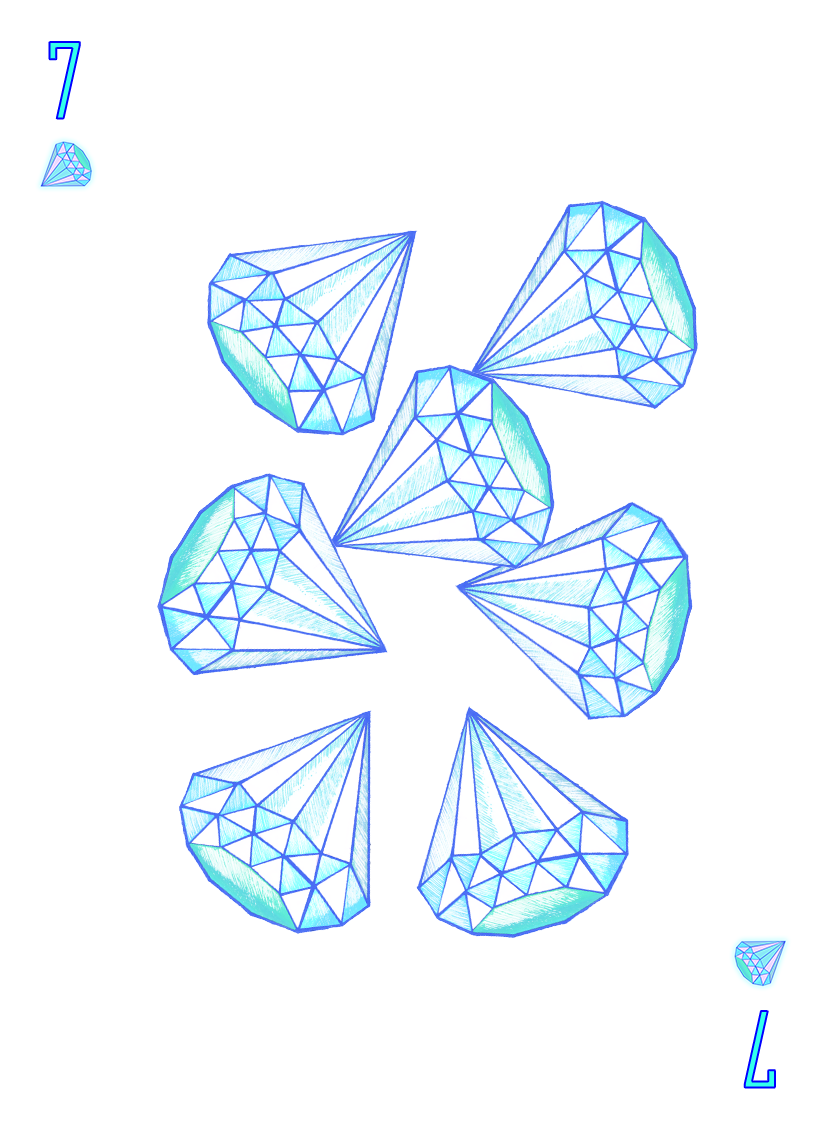
<style>
.page{position:relative;width:825px;height:1125px;background:#ffffff}
.page>*{position:absolute;margin:0}
.t1{font:100px "AgencyFB-Reg";color:#32ffeb}
</style>
<div class="page">
<p class="t1" style="left:49px;top:42px;width:31px;height:77px">7</p>
<p class="t1" style="left:744px;top:1011px;width:31px;height:77px;rotate:180deg">7</p>
</div>
